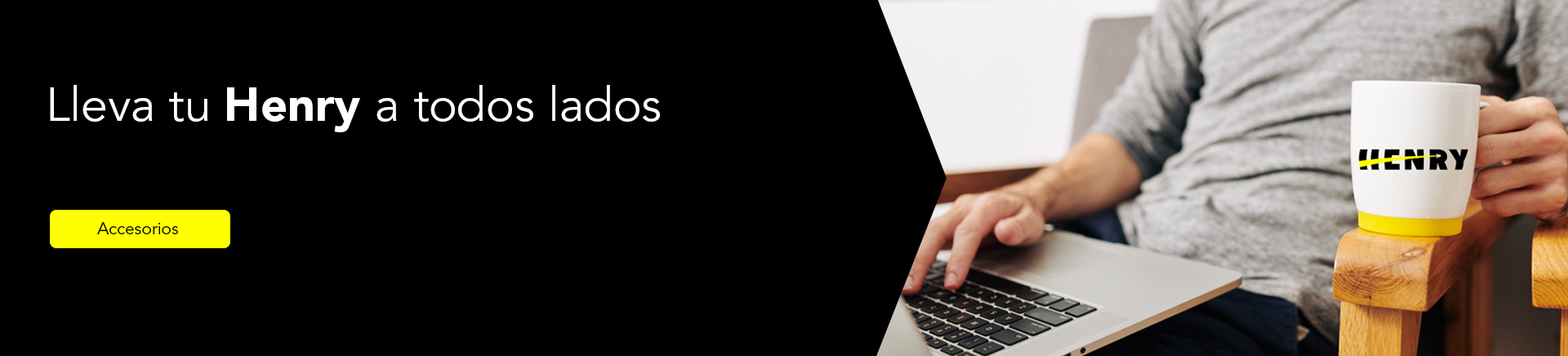
<style>
.page{position:relative;width:1568px;height:356px;background:#000000}
.page>*{position:absolute;margin:0}
.t1{font:47.7px "AvenirLTStd-Book";color:#ffffff}
.t2{font:47.7px "AvenirLTStd-Black";color:#ffffff}
.t3{font:17px "AvenirLTStd-Book";color:#030300}
</style>
<div class="page">
<p class="t1" style="left:50px;top:85px;width:610px;height:47px">Lleva tu <span class="t2">Henry </span>a todos lados</p>
<p class="t3" style="left:97px;top:222px;width:81px;height:12px">Accesorios</p>
</div>
